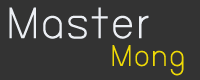
<style>
.page{position:relative;width:200px;height:80px;background:#333333}
.page>*{position:absolute;margin:0}
.t1{font:41.5px "BangnaNew";color:#eceff4}
.t2{font:28.3px "BangnaNew";color:#eed906}
</style>
<div class="page">
<p class="t1" style="left:9px;top:7px;width:140px;height:32px">Master</p>
<p class="t2" style="left:112px;top:45px;width:72px;height:31px">Mong</p>
</div>
